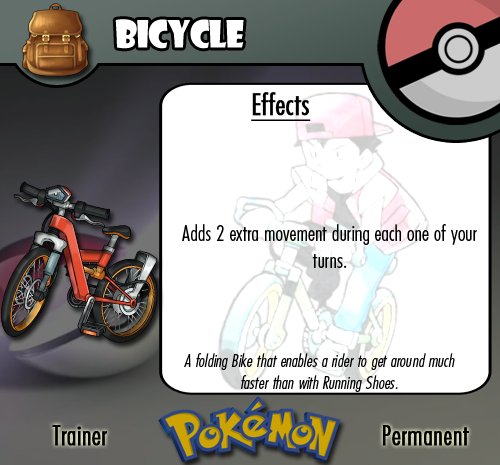
<style>
.page{position:relative;width:500px;height:465px;background:#ffffff}
.page>*{position:absolute;margin:0}
.t1{font:36.7px "ShowcardGothic-Reg";letter-spacing:-0.025em;color:#ffffff;scale:0.91 1}
.t2{font:22.2px "FuturaCondensedBQ-Light";color:#010101}
.t3{font:27.8px "FuturaCondensedBQ-Light";color:#010101;font-weight:bold}
.t4{font:30.6px "FuturaCondensedBQ-Light";color:#010101;font-weight:bold;text-decoration:underline}
.t5{font:18.1px "FuturaCondensedBQ-Light";color:#010101;font-style:italic}
</style>
<div class="page">
<p class="t1" style="left:115px;top:19px;width:129px;height:30px">Bicycle</p>
<p class="t2" style="left:182px;top:92px;width:295px;height:176px"><span class="t3">  </span><span class="t4">Effects<br><br><br><br></span>Adds 2 extra movement during each one of your turns.</p>
<p class="t5" style="left:184px;top:353px;width:271px;height:39px;text-align:center">A folding Bike that enables a rider to get around much faster than with Running Shoes.</p>
<p class="t3" style="left:52px;top:425px;width:55px;height:21px">Trainer</p>
<p class="t3" style="left:383px;top:425px;width:86px;height:21px">Permanent</p>
</div>
